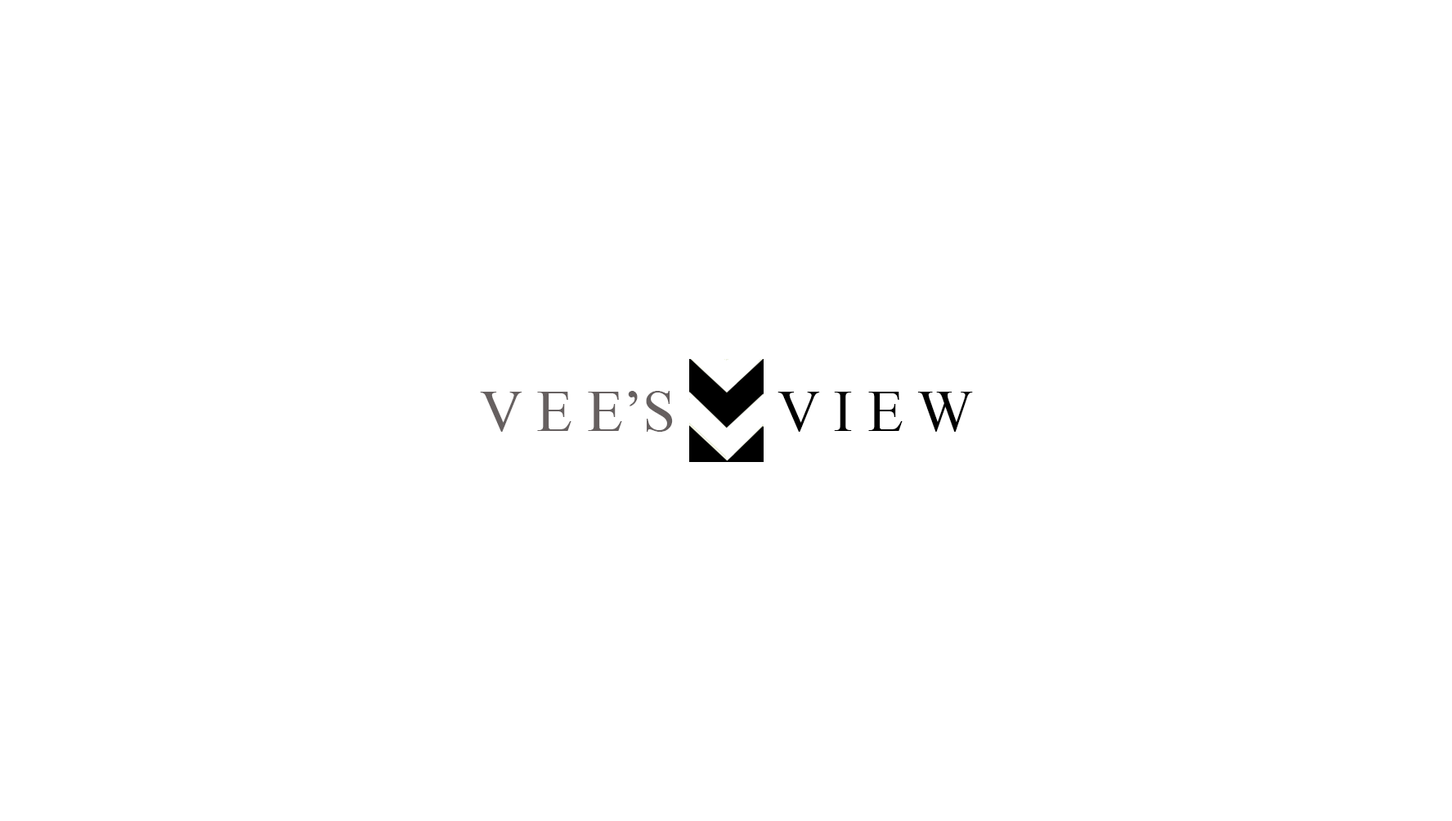
<style>
.page{position:relative;width:1452px;height:821px;background:#ffffff}
.page>*{position:absolute;margin:0}
.t1{font:58.9px "TimesNewRomanPSMT";color:#666060}
.t2{font:49.1px "TimesNewRomanPSMT";color:#000000}
.t3{font:58.9px "TimesNewRomanPSMT";color:#000000}
</style>
<div class="page">
<p class="t1" style="left:480px;top:391px;width:493px;height:41px"><span class="t2"><br></span>V E E’S<span class="t3">       V I E W</span></p>
</div>
